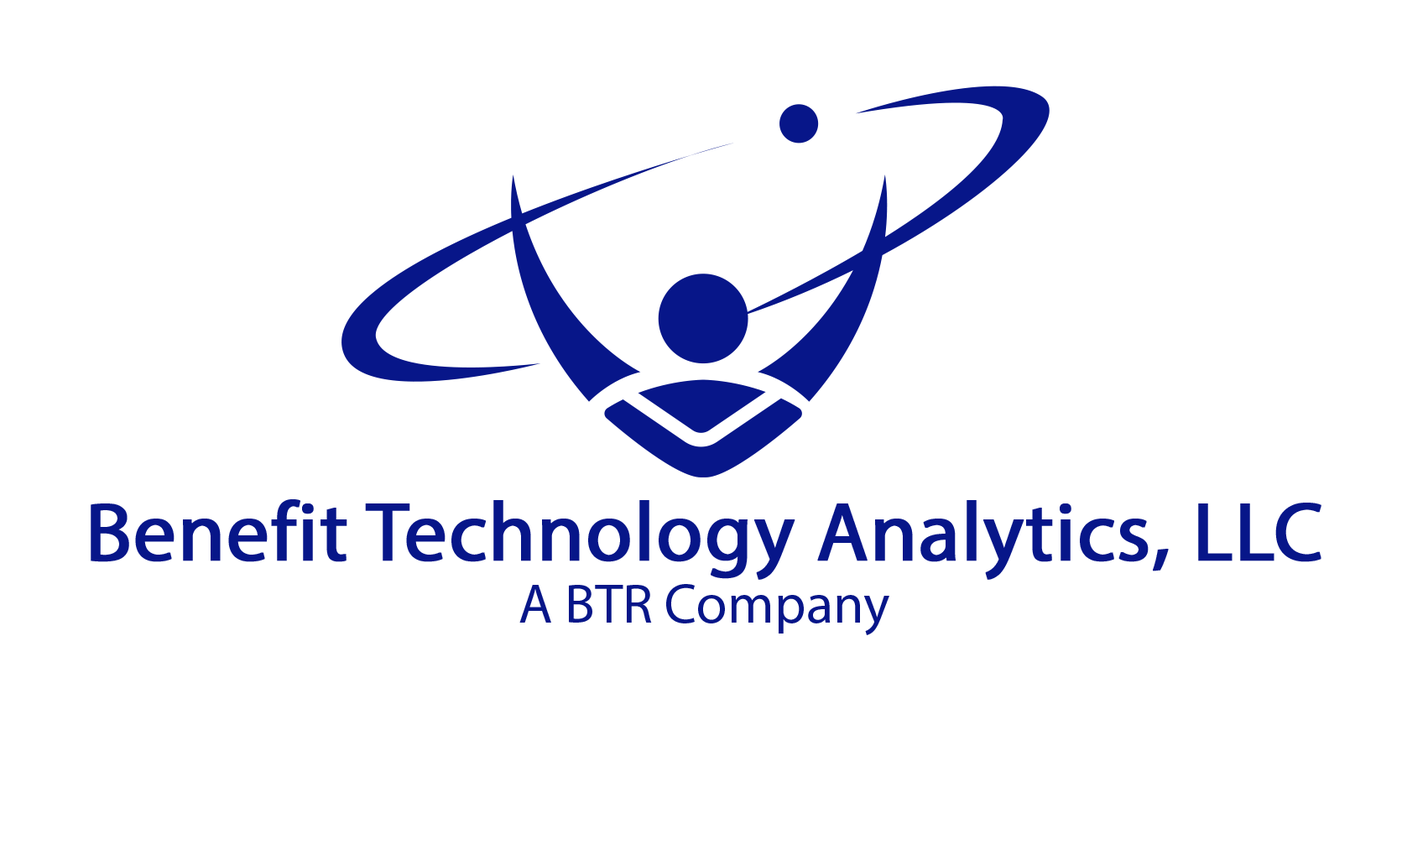
<style>
.page{position:relative;width:1402px;height:850px;background:#ffffff}
.page>*{position:absolute;margin:0}
.t1{font:83.9px/62.9px "MyriadHebrew-Regular";color:#071689;font-weight:bold}
.t2{font:56px/62.9px "MyriadHebrew-Regular";color:#071689}
</style>
<div class="page">
<p class="t1" style="left:91px;top:499px;width:1231px;height:136px;text-align:center">Benefit Technology Analytics, LLC<br><span class="t2">A BTR Company</span></p>
</div>
